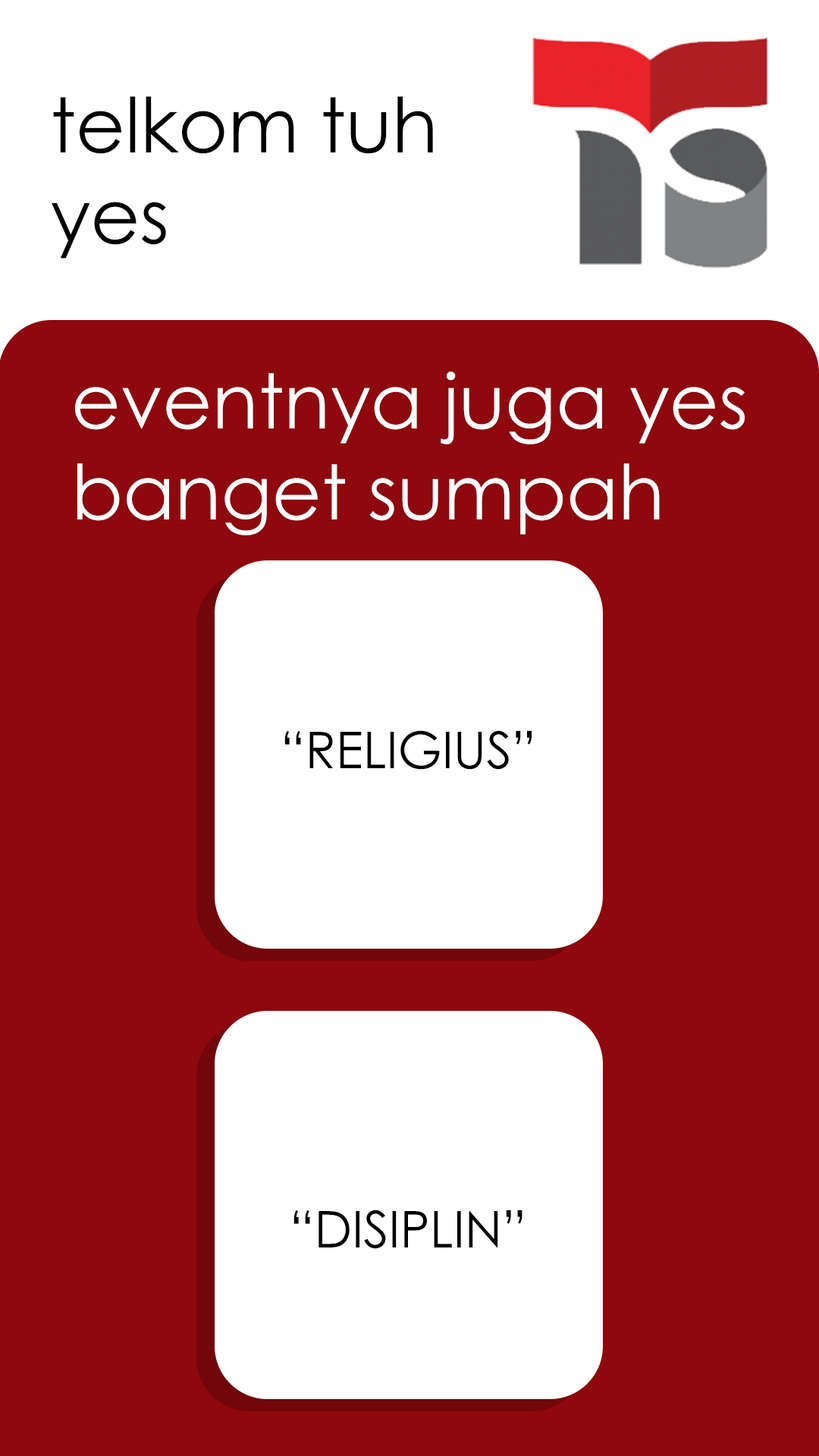
<style>
.page{position:relative;width:819px;height:1456px;background:#8e080d}
.page>*{position:absolute;margin:0}
.t1{font:75.8px "CenturyGothic";color:#000000}
.t2{font:75.8px "CenturyGothic";color:#ffffff}
.t3{font:50.6px "CenturyGothic";color:#000000}
</style>
<div class="page">
<p class="t1" style="left:52px;top:96px;width:381px;height:163px">telkom tuh<br>yes</p>
<p class="t2" style="left:75px;top:372px;width:670px;height:163px">eventnya juga yes<br>banget sumpah</p>
<p class="t3" style="left:284px;top:730px;width:248px;height:40px">“RELIGIUS”</p>
<p class="t3" style="left:293px;top:1210px;width:229px;height:39px">“DISIPLIN”</p>
</div>
